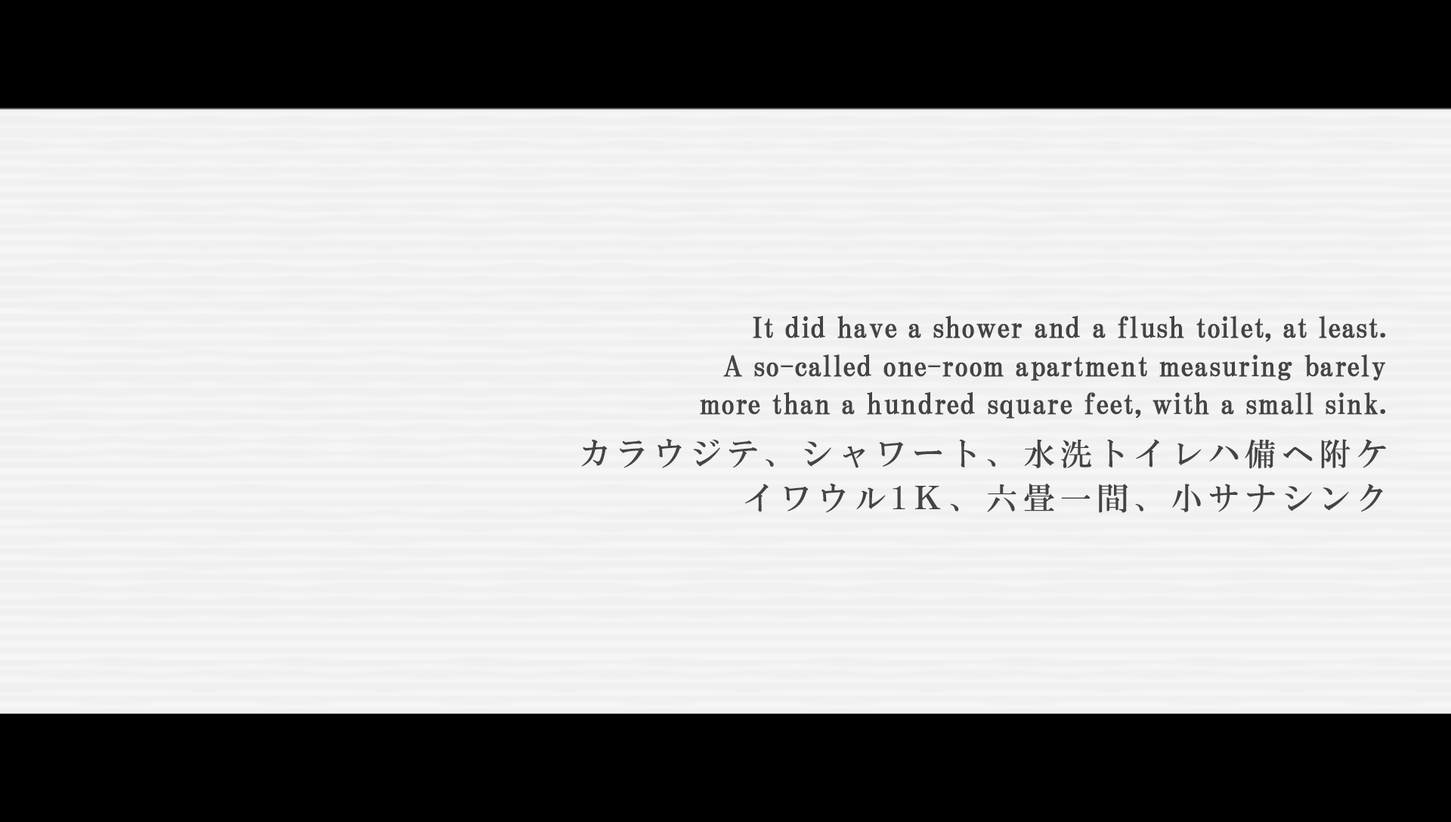
<style>
.page{position:relative;width:1451px;height:822px;background:#f0f0f0}
.page>*{position:absolute;margin:0}
.t1{font:28.2px/38.3px "HGPMinchoB";letter-spacing:0.01em;color:#444444;font-weight:bold}
.t2{font:31.7px/44.6px "HGMinchoB";letter-spacing:0.165em;color:#444444}
</style>
<div class="page">
<p class="t1" style="left:700px;top:316px;width:685px;height:103px;text-align:right">It did have a shower and a flush toilet, at least.<br>A so-called one-room apartment measuring barely<br>more than a hundred square feet, with a small sink.</p>
<p class="t2" style="left:581px;top:439px;width:805px;height:74px;text-align:right">カラウジテ、シャワート、水洗トイレハ備ヘ附ケ<br>イワウル1Ｋ、六畳一間、小サナシンク</p>
</div>
